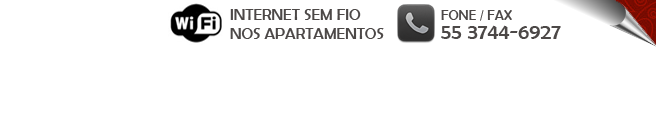
<style>
.page{position:relative;width:656px;height:140px;background:#ffffff}
.page>*{position:absolute;margin:0}
.t1{font:16px "BerlinSansFB-Reg";color:#4c4847}
.t2{font:14px "BerlinSansFB-Reg";color:#4c4847}
.t3{font:22px "BerlinSansFB-Reg";color:#4c4847}
</style>
<div class="page">
<p class="t1" style="left:230px;top:9px;width:154px;height:30px">INTERNET SEM FIO<br>NOS APARTAMENTOS</p>
<p class="t2" style="left:441px;top:10px;width:71px;height:11px">FONE / FAX</p>
<p class="t3" style="left:441px;top:25px;width:120px;height:14px">55 3744-6927</p>
</div>
